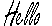
<style>
.page{position:relative;width:52px;height:26px;background:#ffffff}
.page>*{position:absolute;margin:0}
.t1{font:36.7px "FreestyleScript-Regular";color:#000000;scale:0.73 1}
</style>
<div class="page">
<p class="t1" style="left:4px;top:0px;width:36px;height:27px">Hello</p>
</div>
